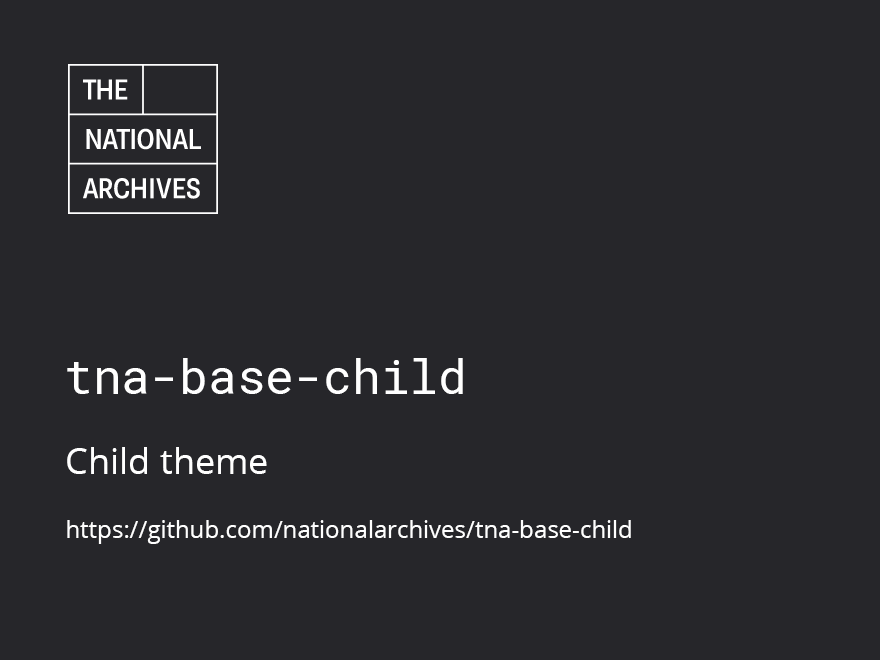
<style>
.page{position:relative;width:880px;height:660px;background:#26262a}
.page>*{position:absolute;margin:0}
.t1{font:48px "RobotoMono-Regular";color:#ffffff}
.t2{font:24px "OpenSans";color:#ffffff}
.t3{font:36px "OpenSans";color:#ffffff}
</style>
<div class="page">
<p class="t1" style="left:67px;top:358px;width:396px;height:36px">tna-base-child</p>
<p class="t2" style="left:67px;top:447px;width:564px;height:97px"><span class="t3">Child theme<br><br></span>https://github.com/nationalarchives/tna-base-child</p>
</div>
